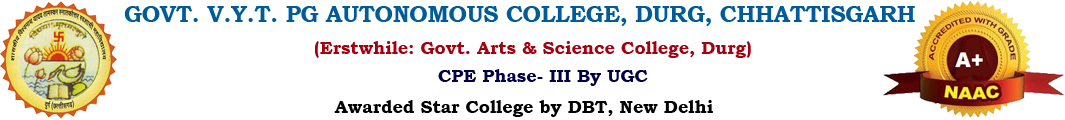
<style>
.page{position:relative;width:1065px;height:120px;background:#ffffff}
.page>*{position:absolute;margin:0}
.t1{font:22.6px "BookmanOldStyle-Bold";color:#005c99;text-transform:uppercase}
.t2{font:18px "BookmanOldStyle-Bold";color:#a4000f}
.t3{font:18px "BookmanOldStyle-Bold";color:#000046}
.t4{font:18px "BookmanOldStyle-Bold";color:#000000}
</style>
<div class="page">
<p class="t1" style="left:124px;top:6px;width:791px;height:20px">Govt. V.Y.T. PG Autonomous College, Durg, chhattisgarh</p>
<p class="t2" style="left:315px;top:41px;width:436px;height:17px">(Erstwhile: Govt. Arts &amp; Science College, Durg)</p>
<p class="t3" style="left:438px;top:69px;width:210px;height:17px">CPE Phase- III By UGC</p>
<p class="t4" style="left:334px;top:100px;width:379px;height:17px">Awarded Star College by DBT, New Delhi</p>
</div>
